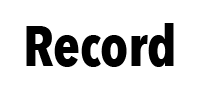
<style>
.page{position:relative;width:200px;height:100px;background:#ffffff}
.page>*{position:absolute;margin:0}
.t1{font:56.7px "AvenirNextCondensed-Bold";color:#000000}
</style>
<div class="page">
<p class="t1" style="left:26px;top:23px;width:148px;height:44px">Record</p>
</div>
